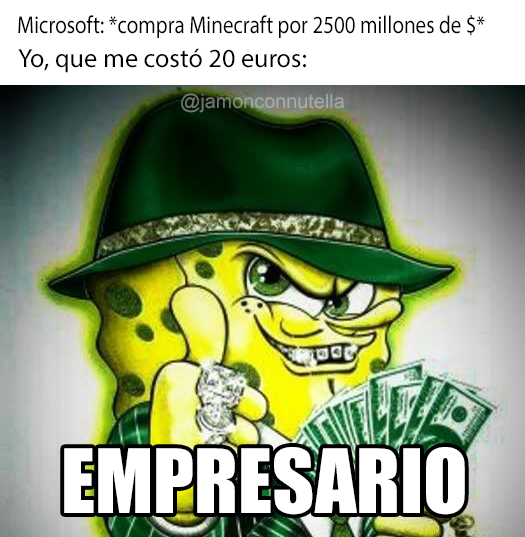
<style>
.page{position:relative;width:525px;height:537px}
.page>*{position:absolute;margin:0}
.t1{font:24.7px "MyriadPro-Regular";color:#000000;scale:0.85 1}
.t2{font:26.2px "MyriadPro-Regular";color:#000000}
.t3{font:19.8px "ArialMT"}
.t4{font:81.7px "Impact";color:#ffffff}
</style>
<div class="page">
<p class="t1" style="left:18px;top:15px;width:467px;height:23px">Microsoft: *compra Minecraft por 2500 millones de $*</p>
<p class="t2" style="left:18px;top:48px;width:288px;height:25px">Yo, que me costó 20 euros:</p>
<p class="t3" style="left:181px;top:93px;width:163px;height:20px">@jamonconnutella</p>
<p class="t4" style="left:64px;top:447px;width:401px;height:68px">EMPRESARIO</p>
</div>
